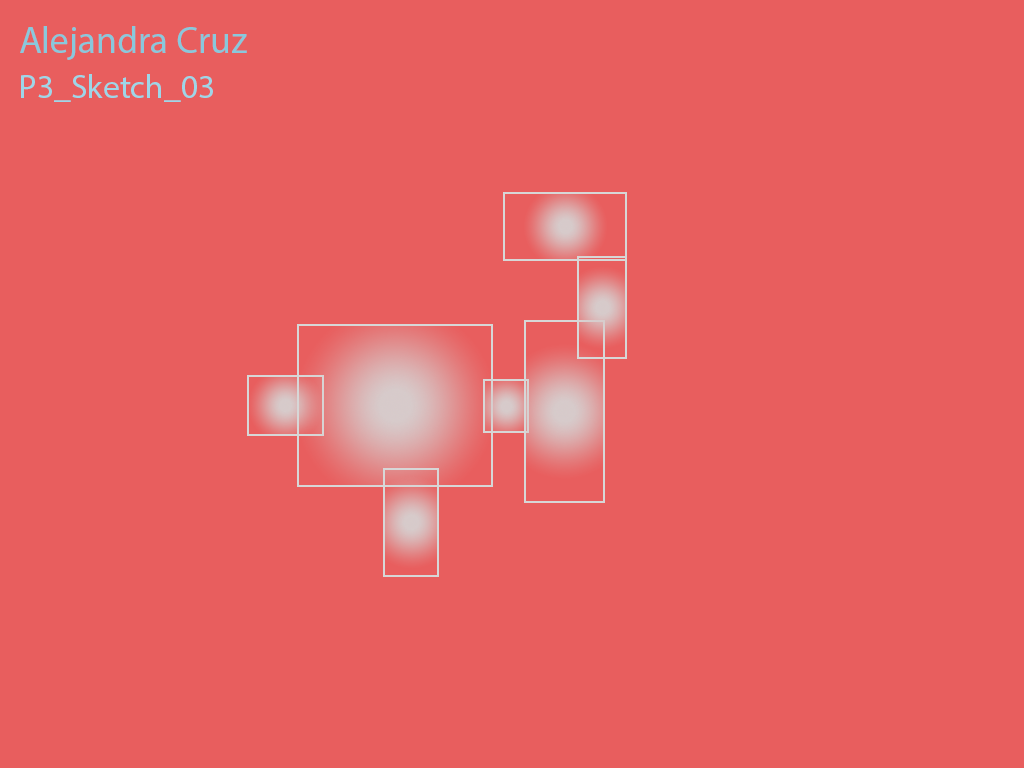
<style>
.page{position:relative;width:1024px;height:768px;background:#e85e5e}
.page>*{position:absolute;margin:0}
.t1{font:37.5px "MyriadPro-Regular";color:#89c8dc}
.t2{font:33.3px "MyriadPro-Regular";color:#9ed6e8}
</style>
<div class="page">
<p class="t1" style="left:20px;top:26px;width:227px;height:34px">Alejandra Cruz</p>
<p class="t2" style="left:21px;top:74px;width:192px;height:28px">P3_Sketch_03</p>
</div>
